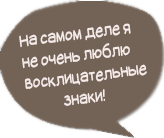
<style>
.page{position:relative;width:164px;height:138px;background:#736357}
.page>*{position:absolute;margin:0}
.t1{font:18px "SuplexmentaryComicNC";color:#f5ebe9;scale:0.8 1}
</style>
<div class="page">
<p class="t1" style="left:19px;top:23px;width:128px;height:83px;rotate:-7deg">На самом деле я <br>не очень люблю <br>восклицательные <br> знаки!</p>
</div>
